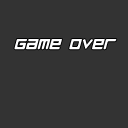
<style>
.page{position:relative;width:128px;height:128px;background:#333333}
.page>*{position:absolute;margin:0}
.t1{font:18px "RazerOblique";color:#fefeff}
</style>
<div class="page">
<p class="t1" style="left:14px;top:39px;width:103px;height:11px">GAME OVER</p>
</div>
